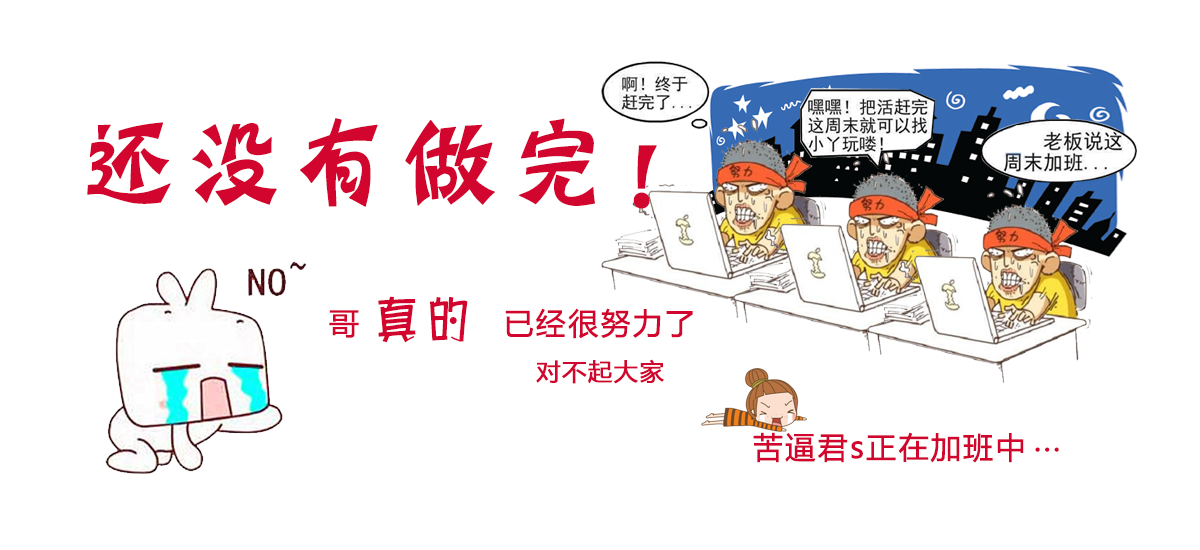
<style>
.page{position:relative;width:1200px;height:550px;background:#ffffff}
.page>*{position:absolute;margin:0}
.t1{font:100px "HYn3gj";letter-spacing:0.05em;color:#d2052e;font-weight:bold}
.t2{font:30px "MicrosoftYaHei";letter-spacing:0.05em;color:#d2052e;font-weight:bold}
.t3{font:48px "Pop1EG-Bold-T-GB";letter-spacing:0.05em;color:#d2052e;font-weight:bold}
.t4{font:24px "MicrosoftYaHei";letter-spacing:0.05em;color:#d2052e;font-weight:bold}
</style>
<div class="page">
<p class="t1" style="left:87px;top:118px;width:570px;height:91px">还没有做完！</p>
<p class="t2" style="left:329px;top:296px;width:364px;height:47px">哥 <span class="t3">真的 </span>已经很努力了</p>
<p class="t4" style="left:536px;top:359px;width:128px;height:25px">对不起大家</p>
<p class="t2" style="left:753px;top:432px;width:271px;height:31px">苦逼君s正在加班中</p>
<p class="t2" style="left:1035px;top:447px;width:24px;height:5px">...</p>
</div>
